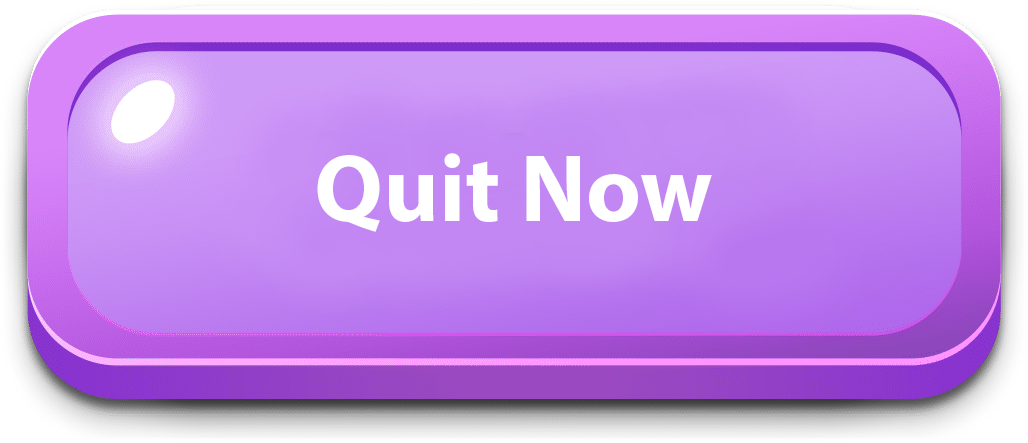
<style>
.page{position:relative;width:1028px;height:443px}
.page>*{position:absolute;margin:0}
.t1{font:96px "MyriadPro-Bold";color:#ffffff}
</style>
<div class="page">
<p class="t1" style="left:317px;top:153px;width:395px;height:79px">Quit Now</p>
</div>
